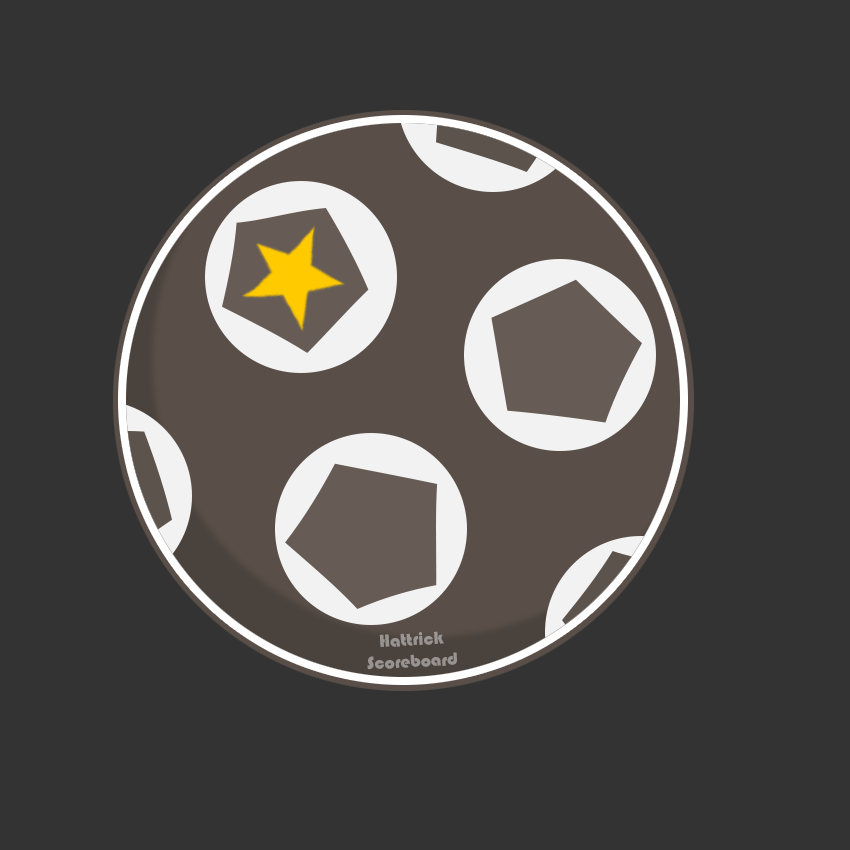
<style>
.page{position:relative;width:850px;height:850px;background:#333333}
.page>*{position:absolute;margin:0}
.t1{font:18px "Bauhaus93";color:#979391}
</style>
<div class="page">
<p class="t1" style="left:367px;top:631px;width:90px;height:39px;text-align:center;rotate:-3deg">Hattrick<br>Scoreboard</p>
</div>
